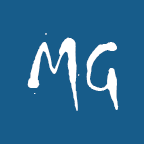
<style>
.page{position:relative;width:144px;height:144px;background:#175c8a}
.page>*{position:absolute;margin:0}
.t1{font:100px "Chiller-Regular";color:#ffffff}
</style>
<div class="page">
<p class="t1" style="left:27px;top:33px;width:92px;height:78px">MG</p>
</div>
